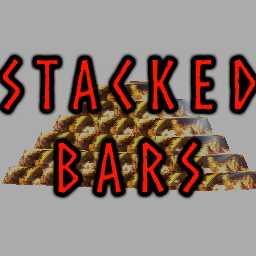
<style>
.page{position:relative;width:256px;height:256px;background:#ababab}
.page>*{position:absolute;margin:0}
.t1{font:69.2px "Norse-Bold";letter-spacing:0.2em;color:#fc1500;text-transform:uppercase}
</style>
<div class="page">
<p class="t1" style="left:2px;top:58px;width:254px;height:137px;text-align:center">Stacked<br>Bars</p>
</div>
